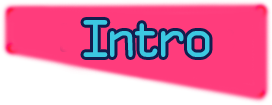
<style>
.page{position:relative;width:272px;height:105px;background:#ff3c7c}
.page>*{position:absolute;margin:0}
.t1{font:48px "OCRAStd";letter-spacing:-0.18em;color:#3cc8e1}
</style>
<div class="page">
<p class="t1" style="left:83px;top:20px;width:127px;height:37px">Intro</p>
</div>
